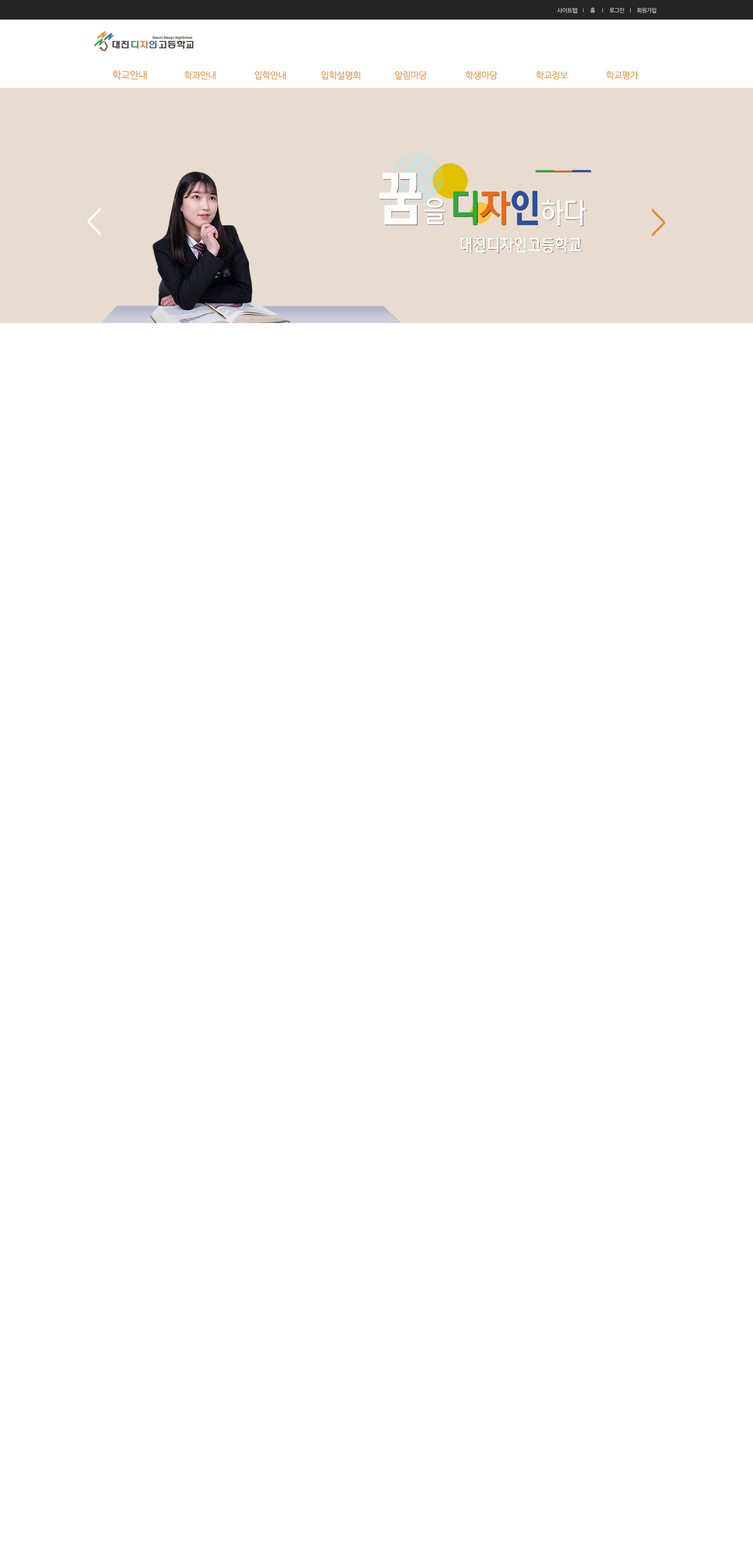
<style>
.page{position:relative;width:753px;height:1568px;background:#ffffff}
.page>*{position:absolute;margin:0}
.t1{font:5.6px "NanumGothic";letter-spacing:-0.05em;color:#ffffff}
.t2{font:9.8px "NanumGothic";letter-spacing:-0.05em;color:#e98b31}
.t3{font:9px "NanumGothic";letter-spacing:-0.05em;color:#e98b31}
.t4{font:31.4px "NanumGothic";letter-spacing:-0.05em;color:#ffffff}
.t5{font:31.4px "NanumGothic";letter-spacing:-0.05em;color:#e98b31}
</style>
<div class="page">
<p class="t1" style="left:557px;top:8px;width:20px;height:5px">사이트맵</p>
<p class="t1" style="left:590px;top:7px;width:5px;height:6px">홈</p>
<p class="t1" style="left:609px;top:8px;width:15px;height:5px">로그인</p>
<p class="t1" style="left:637px;top:8px;width:19px;height:5px">회원가입</p>
<p class="t2" style="left:112px;top:70px;width:35px;height:10px">학교안내</p>
<p class="t3" style="left:184px;top:71px;width:32px;height:9px">학과안내</p>
<p class="t3" style="left:254px;top:71px;width:32px;height:9px">입학안내</p>
<p class="t3" style="left:321px;top:71px;width:39px;height:9px">입학설명회</p>
<p class="t3" style="left:395px;top:71px;width:32px;height:9px">알림마당</p>
<p class="t3" style="left:465px;top:71px;width:32px;height:9px">학생마당</p>
<p class="t3" style="left:535px;top:71px;width:33px;height:9px">학교정보</p>
<p class="t3" style="left:606px;top:71px;width:32px;height:9px">학교평가</p>
<p class="t4" style="left:87px;top:207px;width:14px;height:29px;rotate:180deg">&gt;</p>
<p class="t5" style="left:652px;top:208px;width:13px;height:29px">&gt;</p>
</div>
